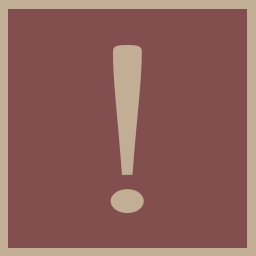
<style>
.page{position:relative;width:256px;height:256px;background:#824e4e}
.page>*{position:absolute;margin:0}
.t1{font:220.2px "AdobeKaitiStd-Regular";color:#c2ae95;scale:1.47 1}
</style>
<div class="page">
<p class="t1" style="left:110px;top:45px;width:34px;height:168px">!</p>
</div>
